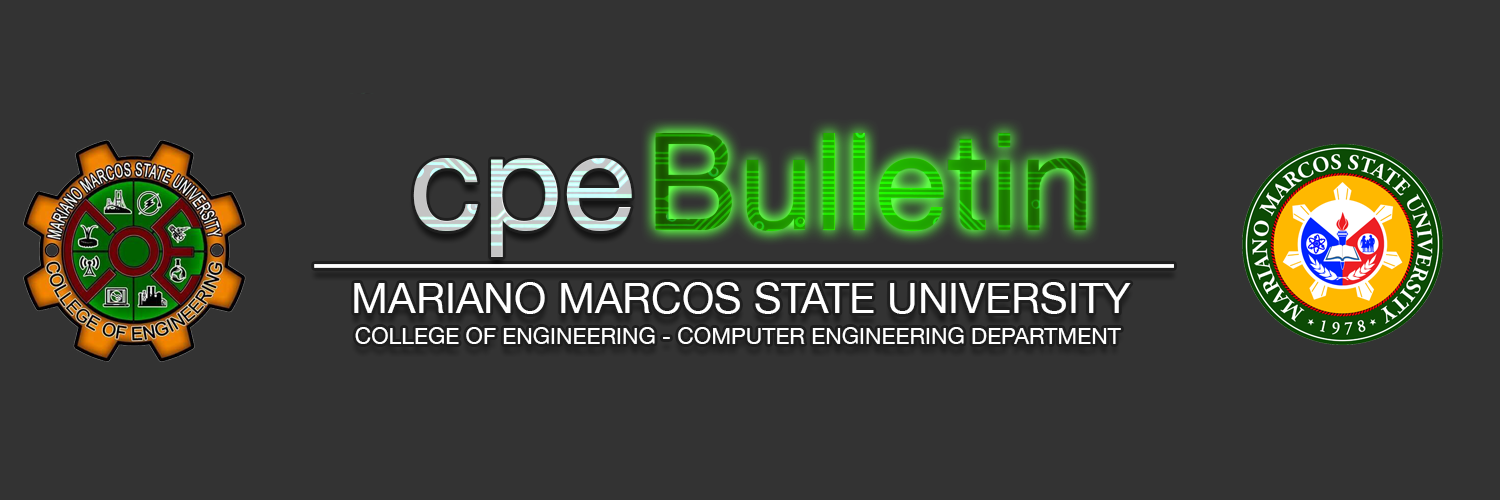
<style>
.page{position:relative;width:1500px;height:500px;background:#333333}
.page>*{position:absolute;margin:0}
.t1{font:135.8px "HelveticaNeue"}
.t2{font:42.4px "HelveticaNeue";color:#ffffff}
.t3{font:22.8px "HelveticaNeue";color:#ffffff}
</style>
<div class="page">
<p class="t1" style="left:655px;top:133px;width:431px;height:98px">Bulletin</p>
<p class="t1" style="left:413px;top:158px;width:219px;height:99px">cpe</p>
<p class="t2" style="left:354px;top:282px;width:777px;height:32px">MARIANO MARCOS STATE UNIVERSITY</p>
<p class="t3" style="left:355px;top:327px;width:766px;height:17px">COLLEGE OF ENGINEERING - COMPUTER ENGINEERING DEPARTMENT</p>
</div>
